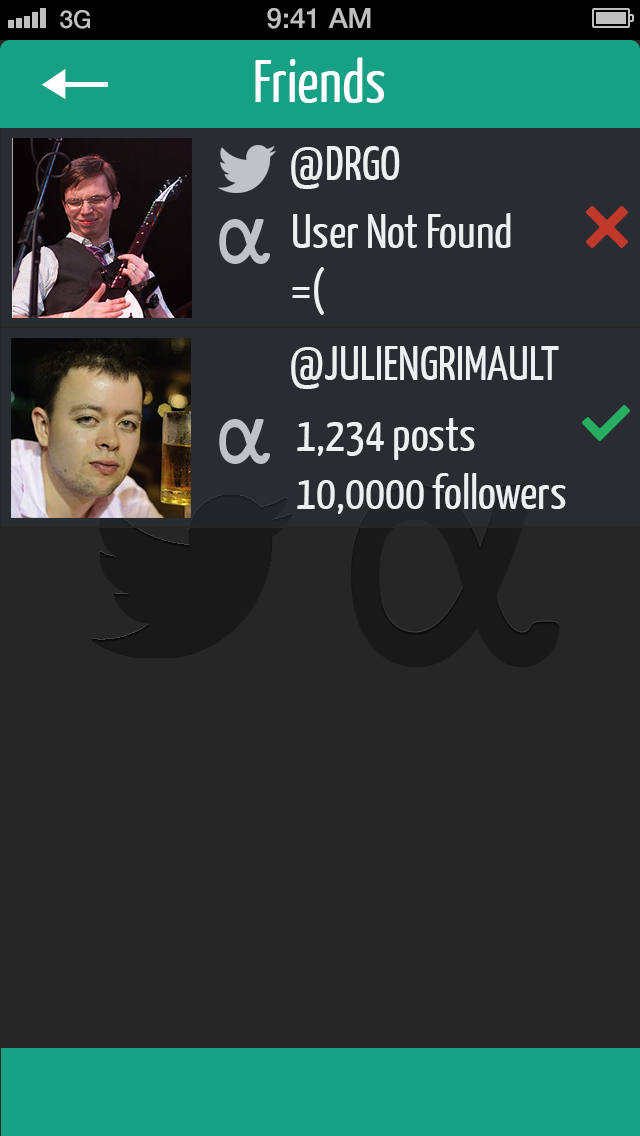
<style>
.page{position:relative;width:640px;height:1136px;background:#262626}
.page>*{position:absolute;margin:0}
.t1{font:24.5px "HelveticaNeue-Medium";color:#bfbfbf}
.t2{font:28.1px "HelveticaNeue-Medium";color:#bfbfbf}
.t3{font:60px "YanoneKaffeesatz-Regular";color:#ffffff}
.t4{font:72px "STHeitiTC-Light";color:#ffffff}
.t5{font:48px "YanoneKaffeesatz-Regular";color:#ecf0f1}
</style>
<div class="page">
<p class="t1" style="left:60px;top:10px;width:30px;height:19px">3G</p>
<p class="t2" style="left:267px;top:8px;width:104px;height:21px">9:41 AM</p>
<p class="t3" style="left:255px;top:57px;width:130px;height:46px">Friends</p>
<p class="t4" style="left:42px;top:69px;width:66px;height:30px">←</p>
<p class="t5" style="left:291px;top:146px;width:109px;height:43px">@DRGO</p>
<p class="t5" style="left:292px;top:213px;width:219px;height:102px">User Not Found <br>=(</p>
<p class="t5" style="left:291px;top:346px;width:268px;height:43px">@JULIENGRIMAULT</p>
<p class="t5" style="left:297px;top:418px;width:178px;height:42px">1,234 posts</p>
<p class="t5" style="left:297px;top:473px;width:269px;height:41px">10,0000 followers</p>
</div>
